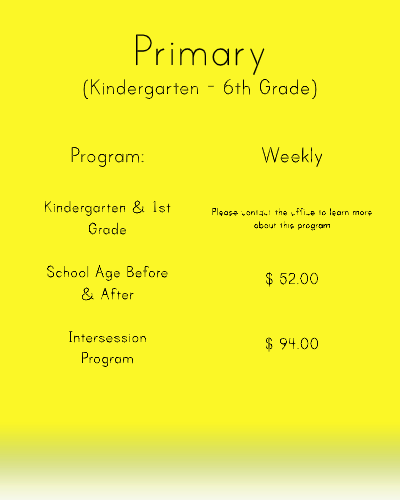
<style>
.page{position:relative;width:400px;height:500px;background:#fbf727}
.page>*{position:absolute;margin:0}
.t1{font:24px "PrintClearly";color:#000000}
.t2{font:50px "PrintClearly";color:#000000}
.t3{font:18px "PrintClearly";color:#000000}
.t4{font:11px "PrintClearly";color:#000000}
</style>
<div class="page">
<p class="t1" style="left:83px;top:34px;width:234px;height:65px;text-align:center"><span class="t2">Primary<br></span>(Kindergarten - 6th Grade)</p>
<p class="t3" style="left:45px;top:147px;width:126px;height:220px;text-align:center"><span class="t1">Program:<br><br></span>Kindergarten &amp; 1st Grade<br><br>School Age Before &amp; After<br><br>Intersession Program</p>
<p class="t4" style="left:212px;top:147px;width:160px;height:205px;text-align:center"><span class="t1">Weekly<br><br><br></span><br>Please contact the office to learn more about this program<br><br><br><span class="t3">$ 52.00<br><br><br>$ 94.00</span></p>
</div>
